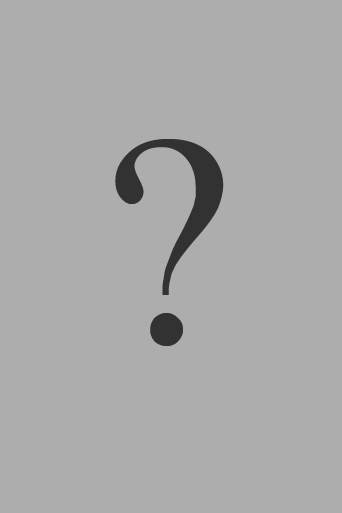
<style>
.page{position:relative;width:342px;height:513px;background:#adadad}
.page>*{position:absolute;margin:0}
.t1{font:300px "Scrypticali-Normal";color:#323232}
</style>
<div class="page">
<p class="t1" style="left:115px;top:139px;width:109px;height:207px">?</p>
</div>
